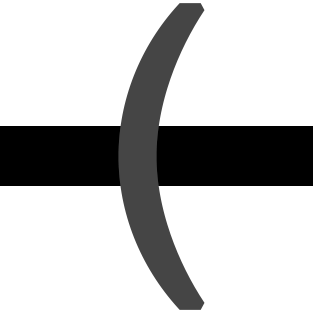
<style>
.page{position:relative;width:313px;height:313px;background:#ffffff}
.page>*{position:absolute;margin:0}
.t1{font:333.3px "Archivo-Regular";color:#454545;font-weight:bold}
</style>
<div class="page">
<p class="t1" style="left:118px;top:3px;width:87px;height:307px">(</p>
</div>
